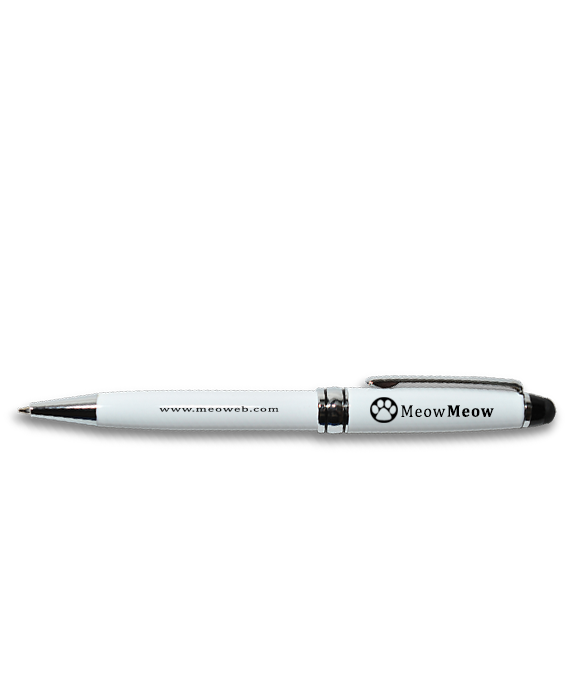
<style>
.page{position:relative;width:573px;height:700px;background:#ffffff}
.page>*{position:absolute;margin:0}
.t1{font:7.6px "Cambria";letter-spacing:0.06em;color:#181a1a;scale:1.78 1}
.t2{font:17.1px "Cambria";letter-spacing:0.06em;color:#000000;scale:0.94 1}
.t3{font:17.1px "Cambria-Bold";letter-spacing:0.06em;color:#000000;scale:0.94 1}
</style>
<div class="page">
<p class="t1" style="left:159px;top:406px;width:120px;height:6px">www.meoweb.com</p>
<p class="t2" style="left:401px;top:405px;width:45px;height:12px">Meow</p>
<p class="t3" style="left:447px;top:405px;width:47px;height:12px">Meow</p>
</div>
